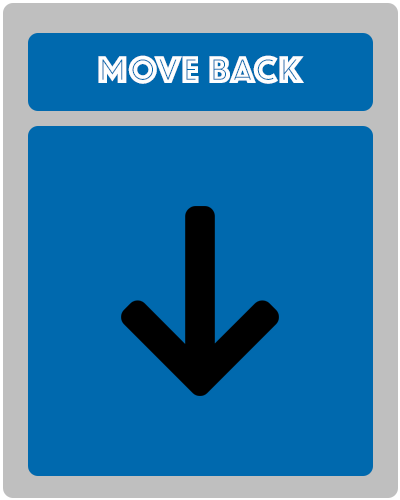
<style>
.page{position:relative;width:400px;height:500px;background:#0069ae}
.page>*{position:absolute;margin:0}
.t1{font:40px "Phosphate-Inline";color:#fefefe}
</style>
<div class="page">
<p class="t1" style="left:98px;top:55px;width:206px;height:29px">MOVE BACK</p>
</div>
